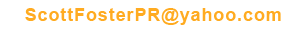
<style>
.page{position:relative;width:281px;height:30px;background:#ffffff}
.page>*{position:absolute;margin:0}
.t1{font:18px "Arial-BoldMT";letter-spacing:0.05em;color:#ffab21}
</style>
<div class="page">
<p class="t1" style="left:25px;top:8px;width:256px;height:17px">ScottFosterPR@yahoo.com</p>
</div>
